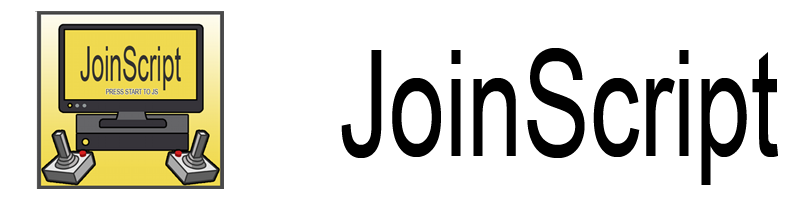
<style>
.page{position:relative;width:800px;height:200px;background:#ffffff}
.page>*{position:absolute;margin:0}
.t1{font:148.2px "ArialMT";color:#000000;scale:0.68 1}
</style>
<div class="page">
<p class="t1" style="left:341px;top:48px;width:437px;height:137px">JoinScript</p>
</div>
